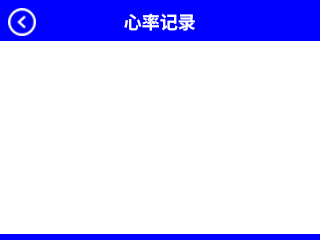
<style>
.page{position:relative;width:320px;height:240px;background:#ffffff}
.page>*{position:absolute;margin:0}
.t1{font:18px "SourceHanSansSC-Bold";color:#ffffff}
</style>
<div class="page">
<p class="t1" style="left:124px;top:13px;width:71px;height:18px">心率记录</p>
</div>
